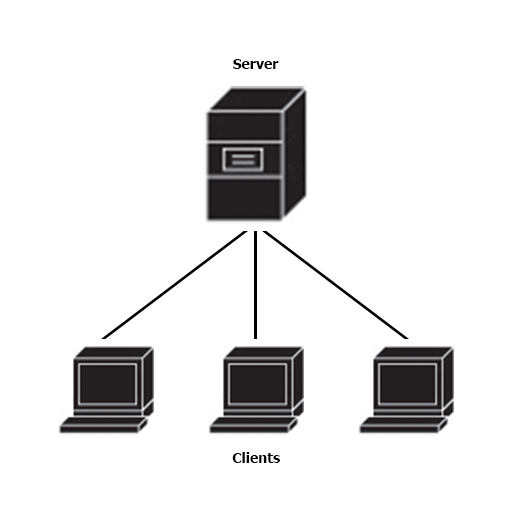
<style>
.page{position:relative;width:512px;height:512px;background:#ffffff}
.page>*{position:absolute;margin:0}
.t1{font:14px "Tahoma-Bold";color:#000000}
</style>
<div class="page">
<p class="t1" style="left:233px;top:59px;width:46px;height:10px">Server</p>
<p class="t1" style="left:232px;top:452px;width:48px;height:11px">Clients</p>
</div>
